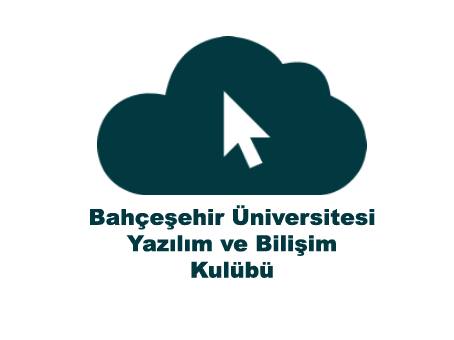
<style>
.page{position:relative;width:454px;height:340px;background:#ffffff}
.page>*{position:absolute;margin:0}
.t1{font:22px "Arial-Black";color:#033a42}
</style>
<div class="page">
<p class="t1" style="left:90px;top:205px;width:285px;height:73px;text-align:center">Bahçeşehir Üniversitesi <br>Yazılım ve Bilişim <br>Kulübü</p>
</div>
